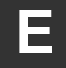
<style>
.page{position:relative;width:66px;height:68px;background:#333333}
.page>*{position:absolute;margin:0}
.t1{font:60px "Arial-BoldMT";color:#ffffff}
</style>
<div class="page">
<p class="t1" style="left:19px;top:10px;width:33px;height:43px">E</p>
</div>
